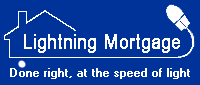
<style>
.page{position:relative;width:200px;height:85px;background:#003399}
.page>*{position:absolute;margin:0}
.t1{font:20px "ArialNarrow";color:#ffffff;font-weight:bold}
.t2{font:12px "RC Sans Serif";color:#ffffff;font-weight:bold}
</style>
<div class="page">
<p class="t1" style="left:24px;top:34px;width:156px;height:19px">Lightning Mortgage</p>
<p class="t2" style="left:10px;top:68px;width:180px;height:11px">Done right, at the speed of light</p>
</div>
